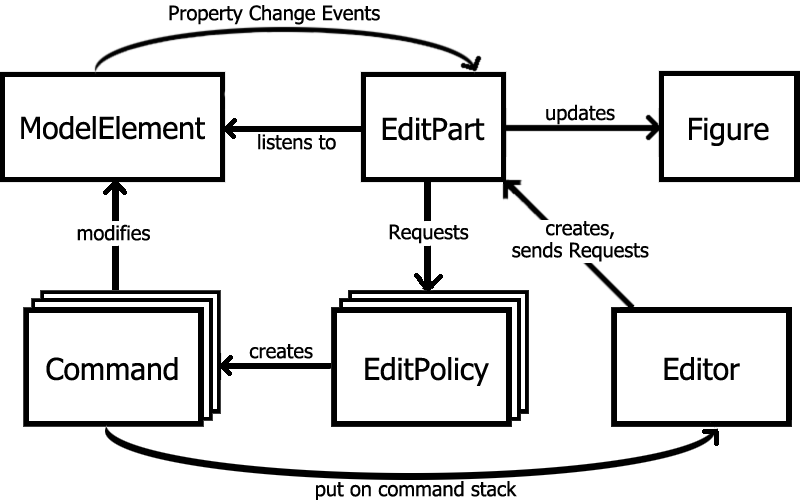
<style>
.page{position:relative;width:800px;height:500px;background:#ffffff}
.page>*{position:absolute;margin:0}
.t1{font:20px "Tahoma";color:#000000}
.t2{font:30px "Tahoma";color:#000000}
.t3{font:20px/22.1px "Tahoma";color:#000000}
</style>
<div class="page">
<p class="t1" style="left:169px;top:5px;width:211px;height:20px">Property Change Events</p>
<p class="t1" style="left:546px;top:104px;width:69px;height:21px">updates</p>
<p class="t2" style="left:21px;top:116px;width:184px;height:24px">ModelElement</p>
<p class="t2" style="left:382px;top:117px;width:103px;height:24px">EditPart</p>
<p class="t2" style="left:689px;top:117px;width:80px;height:29px">Figure</p>
<p class="t1" style="left:258px;top:134px;width:78px;height:16px">listens to</p>
<p class="t3" style="left:512px;top:221px;width:137px;height:41px;text-align:center">creates,<br>sends Requests</p>
<p class="t1" style="left:77px;top:224px;width:73px;height:17px">modifies</p>
<p class="t1" style="left:389px;top:224px;width:80px;height:20px">Requests</p>
<p class="t1" style="left:249px;top:344px;width:64px;height:15px">creates</p>
<p class="t2" style="left:46px;top:357px;width:132px;height:24px">Command</p>
<p class="t2" style="left:365px;top:357px;width:124px;height:29px">EditPolicy</p>
<p class="t2" style="left:664px;top:357px;width:76px;height:24px">Editor</p>
<p class="t1" style="left:316px;top:481px;width:201px;height:20px">put on command stack</p>
</div>
